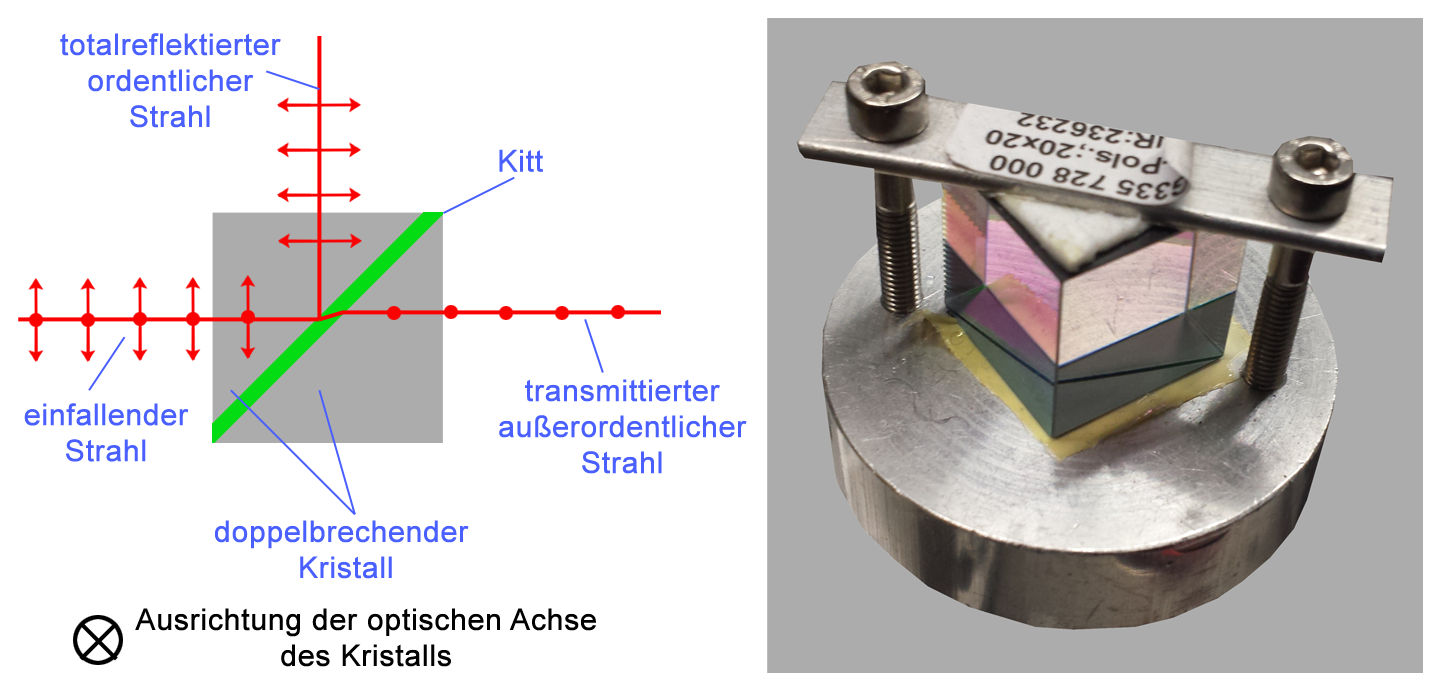
<style>
.page{position:relative;width:1440px;height:691px;background:#ffffff}
.page>*{position:absolute;margin:0}
.t1{font:30px "ArialMT";color:#495fff;font-weight:bold}
.t2{font:30px "ArialMT";color:#000000;font-weight:bold}
</style>
<div class="page">
<p class="t1" style="left:60px;top:33px;width:221px;height:95px;text-align:center">totalreflektierter<br>ordentlicher<br>Strahl</p>
<p class="t1" style="left:499px;top:149px;width:44px;height:23px">Kitt</p>
<p class="t1" style="left:499px;top:379px;width:248px;height:95px;text-align:center">transmittierter<br>außerordentlicher<br>Strahl</p>
<p class="t1" style="left:24px;top:403px;width:165px;height:59px;text-align:center">einfallender<br>Strahl</p>
<p class="t1" style="left:215px;top:520px;width:254px;height:59px;text-align:center">doppelbrechender <br>Kristall</p>
<p class="t2" style="left:135px;top:608px;width:461px;height:59px;text-align:center">Ausrichtung der optischen Achse<br>des Kristalls</p>
</div>
